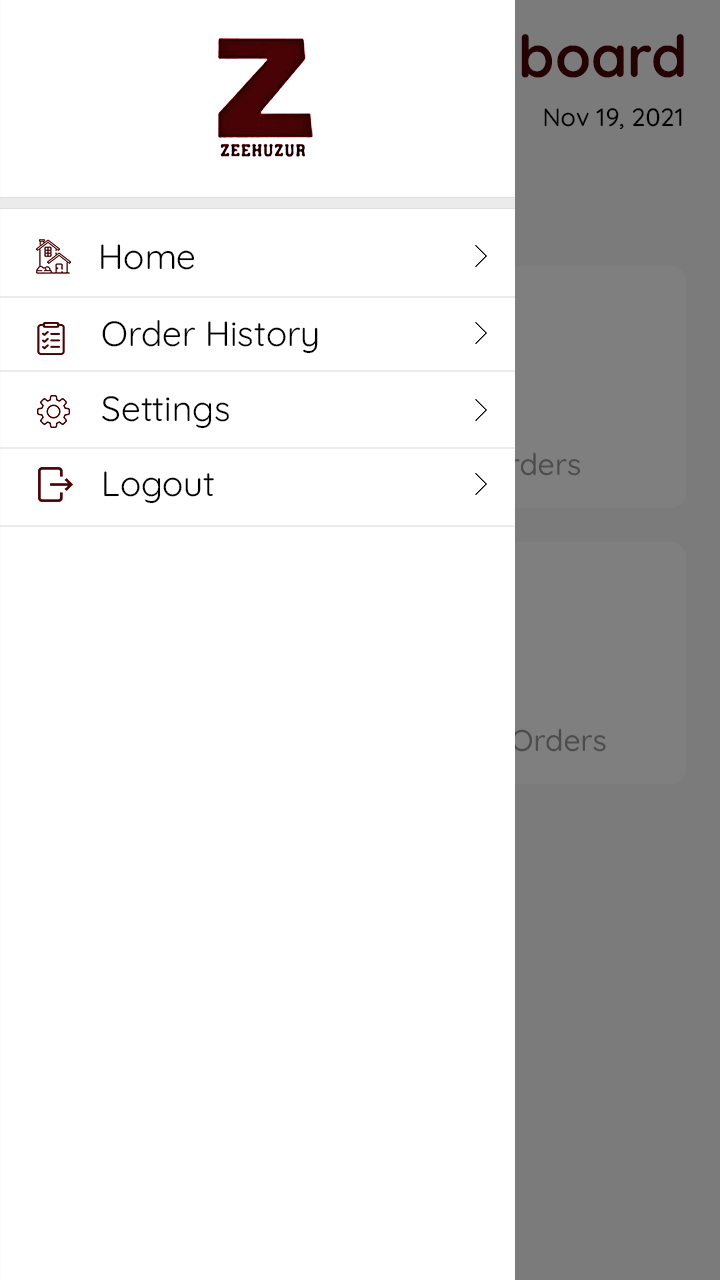
<style>
.page{position:relative;width:720px;height:1280px;background:#ffffff}
.page>*{position:absolute;margin:0}
.t1{font:25px "Quicksand-Medium";color:#000000}
.t2{font:35px "Quicksand-Regular";color:#000000}
</style>
<div class="page">
<p class="t1" style="left:544px;top:108px;width:138px;height:22px">Nov 19, 2021</p>
<p class="t2" style="left:101px;top:244px;width:94px;height:26px">Home</p>
<p class="t2" style="left:102px;top:320px;width:216px;height:34px">Order History</p>
<p class="t2" style="left:102px;top:396px;width:127px;height:33px">Settings</p>
<p class="t2" style="left:104px;top:471px;width:110px;height:33px">Logout</p>
</div>
